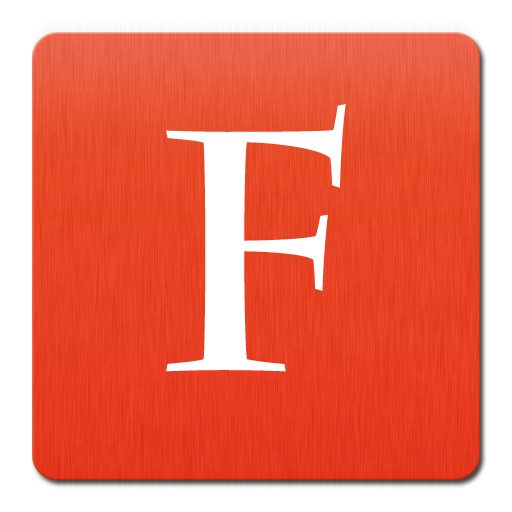
<style>
.page{position:relative;width:512px;height:512px;background:#ffffff}
.page>*{position:absolute;margin:0}
.t1{font:340px "CharlemagneStd-Bold";color:#ffffff}
</style>
<div class="page">
<p class="t1" style="left:166px;top:104px;width:180px;height:268px">F</p>
</div>
